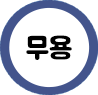
<style>
.page{position:relative;width:98px;height:95px;background:#ffffff}
.page>*{position:absolute;margin:0}
.t1{font:30px "BMJUA";color:#000000}
</style>
<div class="page">
<p class="t1" style="left:26px;top:35px;width:46px;height:25px">무용</p>
</div>
